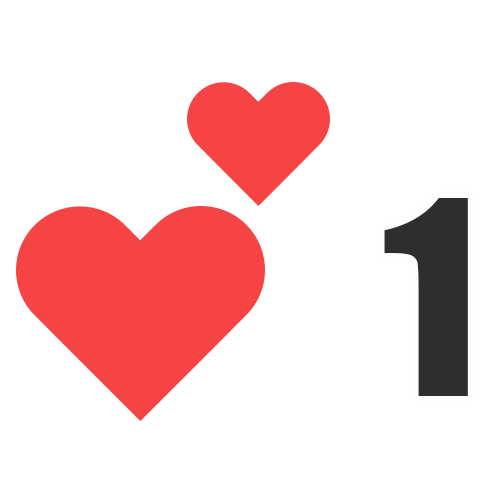
<style>
.page{position:relative;width:500px;height:500px;background:#ffffff}
.page>*{position:absolute;margin:0}
.t1{font:250px "Impact";color:#2e2e2e}
</style>
<div class="page">
<p class="t1" style="left:384px;top:198px;width:84px;height:198px">1</p>
</div>
